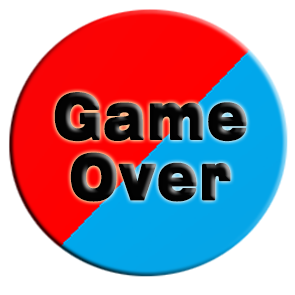
<style>
.page{position:relative;width:295px;height:295px;background:#ffffff}
.page>*{position:absolute;margin:0}
.t1{font:107px/18.8px "Swiss721BT-BlackExtended";letter-spacing:0.035em;color:#030303;font-weight:bold;scale:0.73 1}
.t2{font:107px/60.4px "Swiss721BT-BlackExtended";letter-spacing:0.035em;color:#030303;font-weight:bold;scale:0.73 1}
</style>
<div class="page">
<p class="t1" style="left:54px;top:92px;width:193px;height:110px;text-align:center">Game<br><span class="t2">Over</span></p>
</div>
